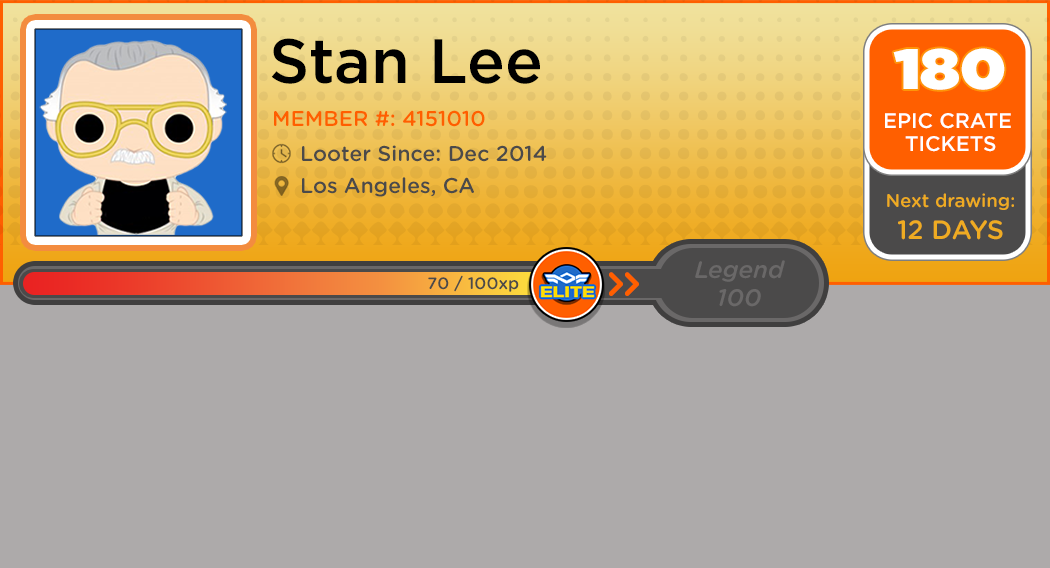
<style>
.page{position:relative;width:1050px;height:568px;background:#adaaaa}
.page>*{position:absolute;margin:0}
.t1{font:62.7px "GothamHTF-Medium";color:#000000}
.t2{font:56.9px "GothamHTF-Ultra";color:#ffffff;scale:1.11 1}
.t3{font:21.3px "GothamRounded-Medium";color:#ff5f00}
.t4{font:21.1px/23px "GothamHTF-Medium";color:#ffffff}
.t5{font:21.3px "GothamRounded-Medium";color:#4b4a4a}
.t6{font:18.6px/32.1px "GothamRounded-Medium";color:#efab22}
.t7{font:26.4px/32.1px "GothamRounded-Medium";color:#efab22}
.t8{font:23.9px/27.9px "GothamRounded-MediumItalic";color:#6a6868}
.t9{font:16.5px "GothamRounded-Medium";color:#4b4a4a}
.t10{font:36.9px "GeometrySoftPro-BoldN";color:#ff5f00}
</style>
<div class="page">
<p class="t1" style="left:271px;top:38px;width:269px;height:46px">Stan Lee</p>
<p class="t2" style="left:893px;top:48px;width:112px;height:42px">180</p>
<p class="t3" style="left:274px;top:110px;width:211px;height:17px">MEMBER #: 4151010</p>
<p class="t4" style="left:885px;top:113px;width:126px;height:39px;text-align:center">EPIC CRATE <br>TICKETS</p>
<p class="t5" style="left:302px;top:145px;width:245px;height:17px">Looter Since: Dec 2014</p>
<p class="t5" style="left:302px;top:177px;width:172px;height:20px">Los Angeles, CA</p>
<p class="t6" style="left:887px;top:193px;width:127px;height:47px;text-align:center">Next drawing:<br><span class="t7">12 DAYS</span></p>
<p class="t8" style="left:695px;top:260px;width:90px;height:47px;text-align:center">Legend<br>100</p>
<p class="t9" style="left:428px;top:275px;width:91px;height:17px">70 / 100xp</p>
<p class="t10" style="left:609px;top:272px;width:30px;height:24px">&gt;&gt;</p>
</div>
